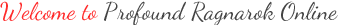
<style>
.page{position:relative;width:338px;height:25px;background:#ffffff}
.page>*{position:absolute;margin:0}
.t1{font:24px "DancingScriptOT";color:#434343}
.t2{font:24px "DancingScriptOT";color:#ff2b2b}
</style>
<div class="page">
<p class="t1" style="left:0px;top:1px;width:338px;height:25px"><span class="t2">Welcome to </span>Profound Ragnarok Online</p>
</div>
